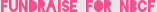
<style>
.page{position:relative;width:157px;height:12px;background:#f05193}
.page>*{position:absolute;margin:0}
.t1{font:16px "Blackout-Midnight";color:#f05193}
</style>
<div class="page">
<p class="t1" style="left:1px;top:0px;width:155px;height:12px">Fundraise for NBCF</p>
</div>
